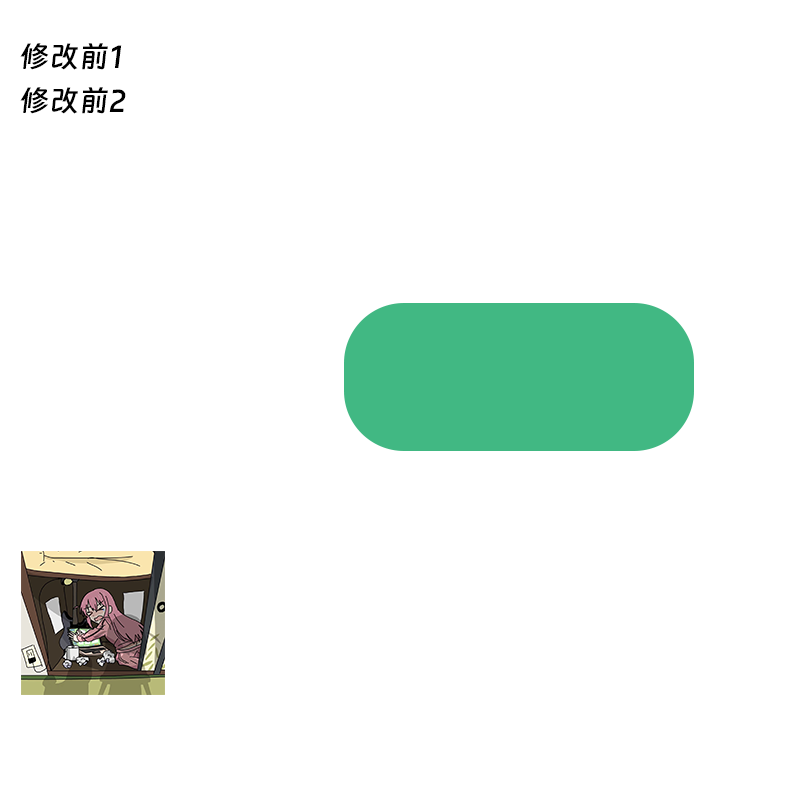
<style>
.page{position:relative;width:800px;height:800px;background:#ffffff}
.page>*{position:absolute;margin:0}
.t1{font:30px "DingTalk-JinBuTi";color:#000000}
</style>
<div class="page">
<p class="t1" style="left:20px;top:43px;width:102px;height:27px">修改前1</p>
<p class="t1" style="left:20px;top:87px;width:106px;height:27px">修改前2</p>
</div>
